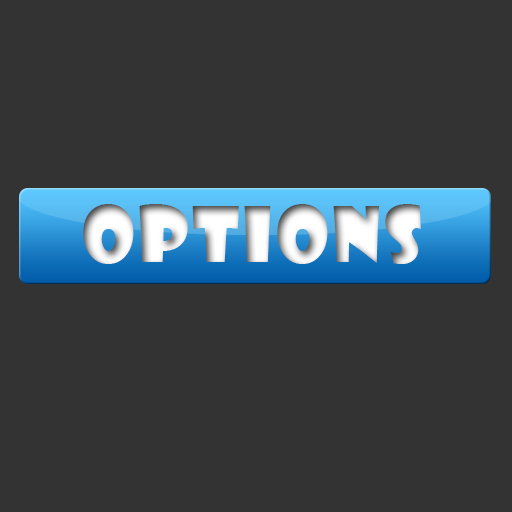
<style>
.page{position:relative;width:512px;height:512px;background:#333333}
.page>*{position:absolute;margin:0}
.t1{font:75.1px "ShowcardGothic-Reg";letter-spacing:0.05em}
</style>
<div class="page">
<p class="t1" style="left:83px;top:204px;width:338px;height:60px">OPTIONS</p>
</div>
